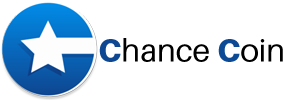
<style>
.page{position:relative;width:300px;height:100px;background:#ffffff}
.page>*{position:absolute;margin:0}
.t1{font:31.8px "Aileron-Regular";color:#000000}
.t2{font:31.8px "Aileron-Black";color:#0e4792}
.t3{font:31.8px "Aileron-Black";color:#0d4a95}
</style>
<div class="page">
<p class="t1" style="left:99px;top:38px;width:184px;height:24px"><span class="t2">C</span>hance <span class="t3">C</span>oin</p>
</div>
